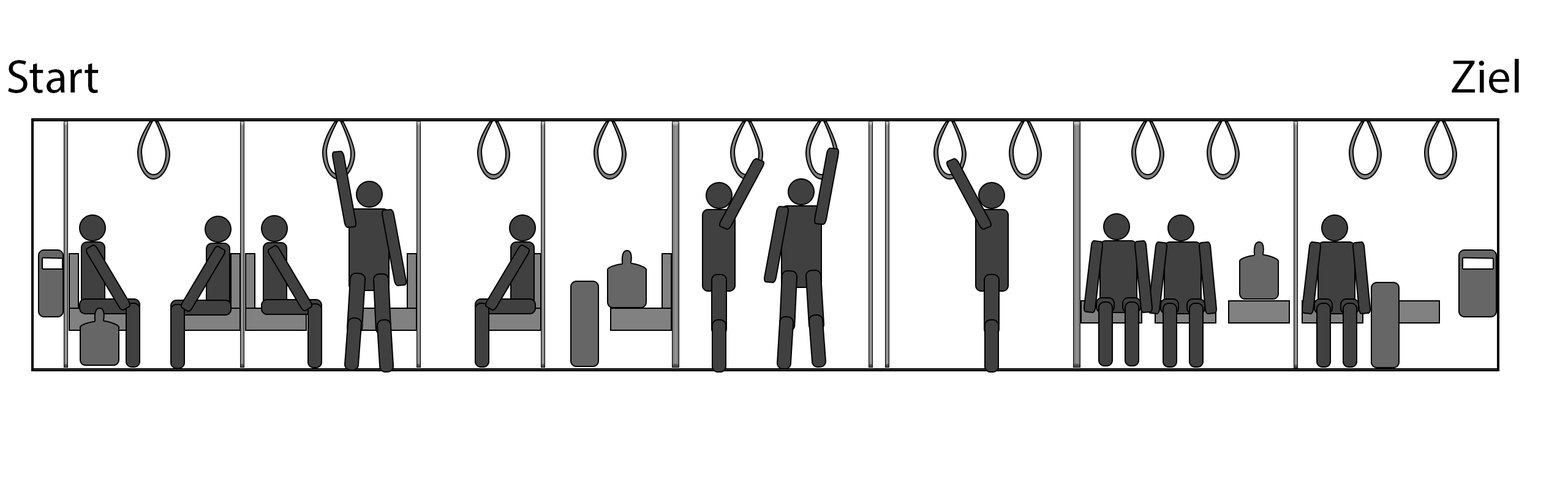
<style>
.page{position:relative;width:1568px;height:500px;background:#ffffff}
.page>*{position:absolute;margin:0}
.t1{font:47.1px "MyriadPro-Regular";color:#000000}
</style>
<div class="page">
<p class="t1" style="left:8px;top:60px;width:91px;height:33px">Start</p>
<p class="t1" style="left:1452px;top:59px;width:67px;height:34px">Ziel</p>
</div>
